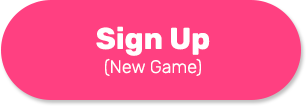
<style>
.page{position:relative;width:306px;height:106px;background:#ff4081}
.page>*{position:absolute;margin:0}
.t1{font:18px/24px "Rubik-Light";color:#ffffff}
.t2{font:30px/48.9px "Rubik-Bold";color:#ffffff}
</style>
<div class="page">
<p class="t1" style="left:96px;top:26px;width:114px;height:50px;text-align:center"><span class="t2">Sign Up<br></span>(New Game)</p>
</div>
